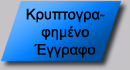
<style>
.page{position:relative;width:130px;height:70px}
.page>*{position:absolute;margin:0}
.t1{font:14.7px "ArialMT";color:#000000}
</style>
<div class="page">
<p class="t1" style="left:26px;top:8px;width:79px;height:50px;text-align:center">Κρυπτογρα-<br>φημένο<br>Έγγραφο</p>
</div>
